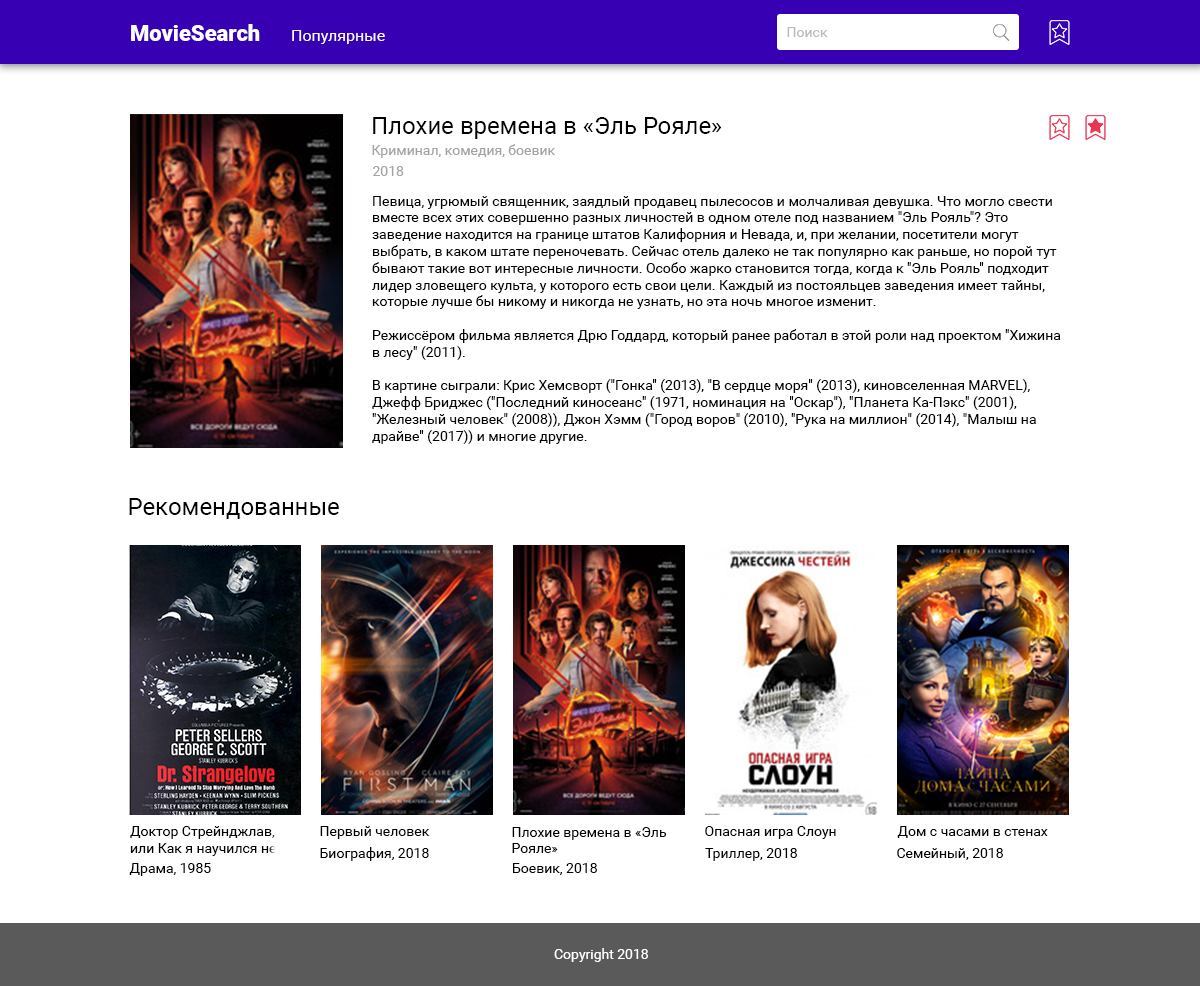
<style>
.page{position:relative;width:1200px;height:986px;background:#ffffff}
.page>*{position:absolute;margin:0}
.t1{font:22px "Roboto-Black";color:#ffffff}
.t2{font:16px "Roboto-Regular";color:#ffffff}
.t3{font:14px "Roboto-Regular";color:#bbbbbb}
.t4{font:24px "Roboto-Regular";color:#020301}
.t5{font:14px "Roboto-Regular";color:#a3a3a3}
.t6{font:14px "Roboto-Regular";color:#020301}
.t7{font:14px "Roboto-Regular";color:#ffffff}
</style>
<div class="page">
<p class="t1" style="left:131px;top:24px;width:129px;height:17px">MovieSearch</p>
<p class="t2" style="left:292px;top:30px;width:93px;height:14px">Популярные</p>
<p class="t3" style="left:787px;top:27px;width:41px;height:10px">Поиск</p>
<p class="t4" style="left:373px;top:117px;width:349px;height:22px">Плохие времена в «Эль Рояле»</p>
<p class="t5" style="left:372px;top:144px;width:184px;height:14px">Криминал, комедия, боевик</p>
<p class="t5" style="left:373px;top:166px;width:31px;height:10px">2018</p>
<p class="t6" style="left:372px;top:196px;width:689px;height:248px">Певица, угрюмый священник, заядлый продавец пылесосов и молчаливая девушка. Что могло свести вместе всех этих совершенно разных личностей в одном отеле под названием "Эль Рояль"? Это заведение находится на границе штатов Калифорния и Невада, и, при желании, посетители могут выбрать, в каком штате переночевать. Сейчас отель далеко не так популярно как раньше, но порой тут бывают такие вот интересные личности. Особо жарко становится тогда, когда к "Эль Рояль" подходит лидер зловещего культа, у которого есть свои цели. Каждый из постояльцев заведения имеет тайны, которые лучше бы никому и никогда не узнать, но эта ночь многое изменит.<br><br>Режиссёром фильма является Дрю Годдард, который ранее работал в этой роли над проектом "Хижина в лесу" (2011).<br><br>В картине сыграли: Крис Хемсворт ("Гонка" (2013), "В сердце моря" (2013), киновселенная MARVEL), Джефф Бриджес ("Последний киносеанс" (1971, номинация на "Оскар"), "Планета Ка-Пэкс" (2001), "Железный человек" (2008)), Джон Хэмм ("Город воров" (2010), "Рука на миллион" (2014), "Малыш на драйве" (2017)) и многие другие.<br><br>Релиз ленты состоится 3 октября 2018 года в кинотеатрах Франции.</p>
<p class="t4" style="left:129px;top:498px;width:210px;height:21px">Рекомендованные</p>
<p class="t6" style="left:130px;top:826px;width:146px;height:30px">Доктор Стрейнджлав, <br>или Как я научился не</p>
<p class="t6" style="left:320px;top:826px;width:110px;height:13px">Первый человек</p>
<p class="t6" style="left:512px;top:827px;width:155px;height:26px">Плохие времена в «Эль <br>Рояле»</p>
<p class="t6" style="left:705px;top:826px;width:131px;height:13px">Опасная игра Слоун</p>
<p class="t6" style="left:897px;top:826px;width:151px;height:12px">Дом с часами в стенах</p>
<p class="t6" style="left:320px;top:847px;width:109px;height:14px">Биография, 2018</p>
<p class="t6" style="left:705px;top:848px;width:92px;height:13px">Триллер, 2018</p>
<p class="t6" style="left:897px;top:848px;width:106px;height:12px">Семейный, 2018</p>
<p class="t6" style="left:129px;top:863px;width:82px;height:13px">Драма, 1985</p>
<p class="t6" style="left:513px;top:863px;width:84px;height:12px">Боевик, 2018</p>
<p class="t7" style="left:554px;top:948px;width:94px;height:14px">Copyright 2018</p>
</div>
